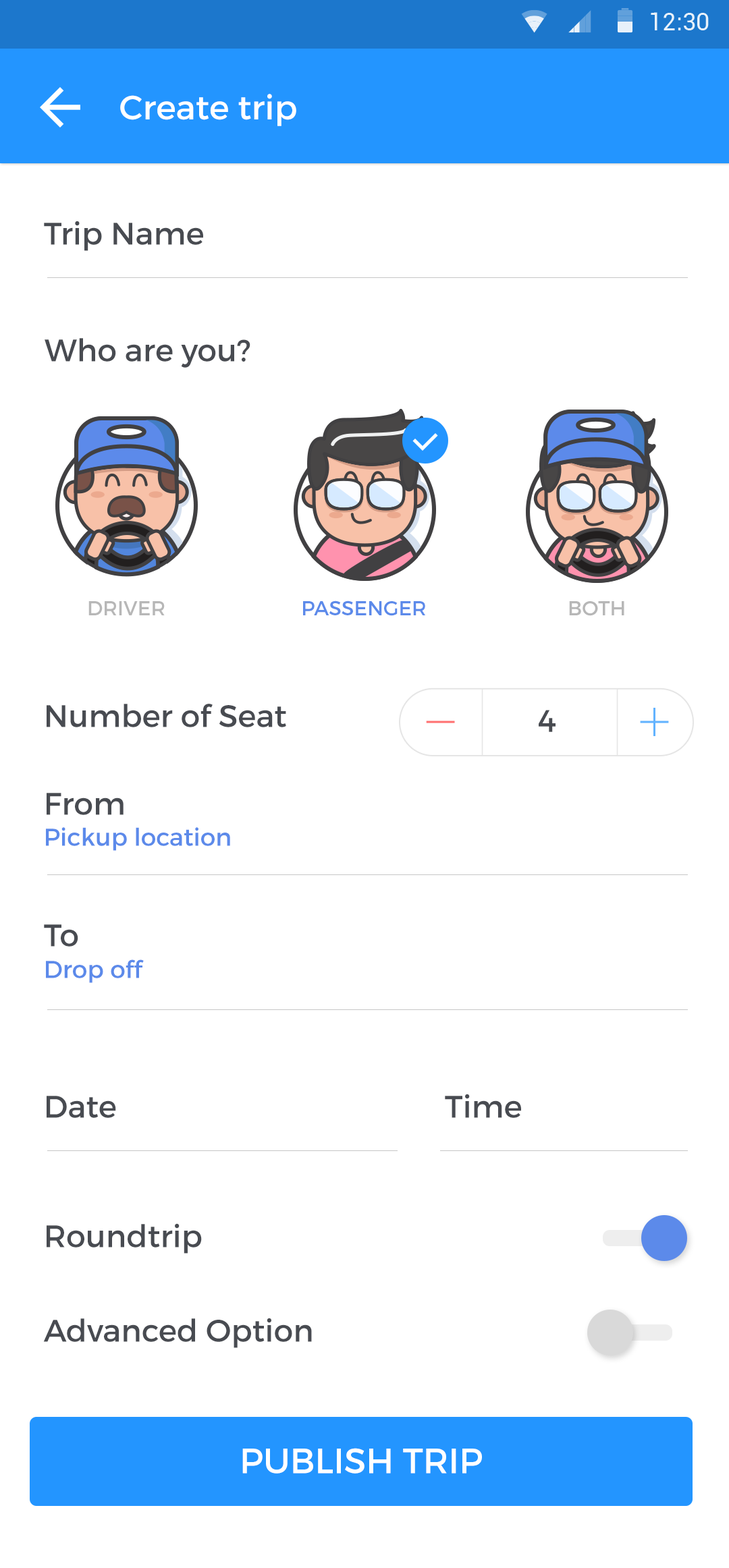
<style>
.page{position:relative;width:729px;height:1568px;background:#ffffff}
.page>*{position:absolute;margin:0}
.t1{font:33.7px "Montserrat-Regular";color:#ffffff}
.t2{font:31px "Montserrat-Regular";color:#484b51}
.t3{font:20.2px "Montserrat-Regular";color:#b7b7b7;text-transform:uppercase}
.t4{font:20.2px "Montserrat-Regular";color:#5c8aea;text-transform:uppercase}
.t5{font:24.3px "Montserrat-Regular";color:#5c8aea}
.t6{font:35.1px "Montserrat-Regular";color:#ffffff;text-transform:uppercase}
</style>
<div class="page">
<p class="t1" style="left:120px;top:94px;width:176px;height:32px">Create trip</p>
<p class="t2" style="left:44px;top:221px;width:159px;height:30px">Trip Name</p>
<p class="t2" style="left:45px;top:338px;width:205px;height:30px">Who are you?</p>
<p class="t3" style="left:88px;top:601px;width:77px;height:14px">DRIVER</p>
<p class="t4" style="left:303px;top:600px;width:122px;height:16px">PASSENGER</p>
<p class="t3" style="left:569px;top:601px;width:55px;height:15px">BOTH</p>
<p class="t2" style="left:47px;top:704px;width:239px;height:23px">Number of Seat</p>
<p class="t2" style="left:538px;top:710px;width:17px;height:22px">4</p>
<p class="t2" style="left:47px;top:793px;width:76px;height:22px">From</p>
<p class="t5" style="left:46px;top:827px;width:184px;height:24px">Pickup location</p>
<p class="t2" style="left:44px;top:924px;width:34px;height:23px">To</p>
<p class="t5" style="left:46px;top:959px;width:98px;height:24px">Drop off</p>
<p class="t2" style="left:47px;top:1096px;width:69px;height:22px">Date</p>
<p class="t2" style="left:445px;top:1094px;width:76px;height:24px">Time</p>
<p class="t2" style="left:47px;top:1223px;width:155px;height:31px">Roundtrip</p>
<p class="t2" style="left:43px;top:1318px;width:269px;height:30px">Advanced Option</p>
<p class="t6" style="left:242px;top:1448px;width:240px;height:26px">PUBLISH TRIP</p>
</div>
